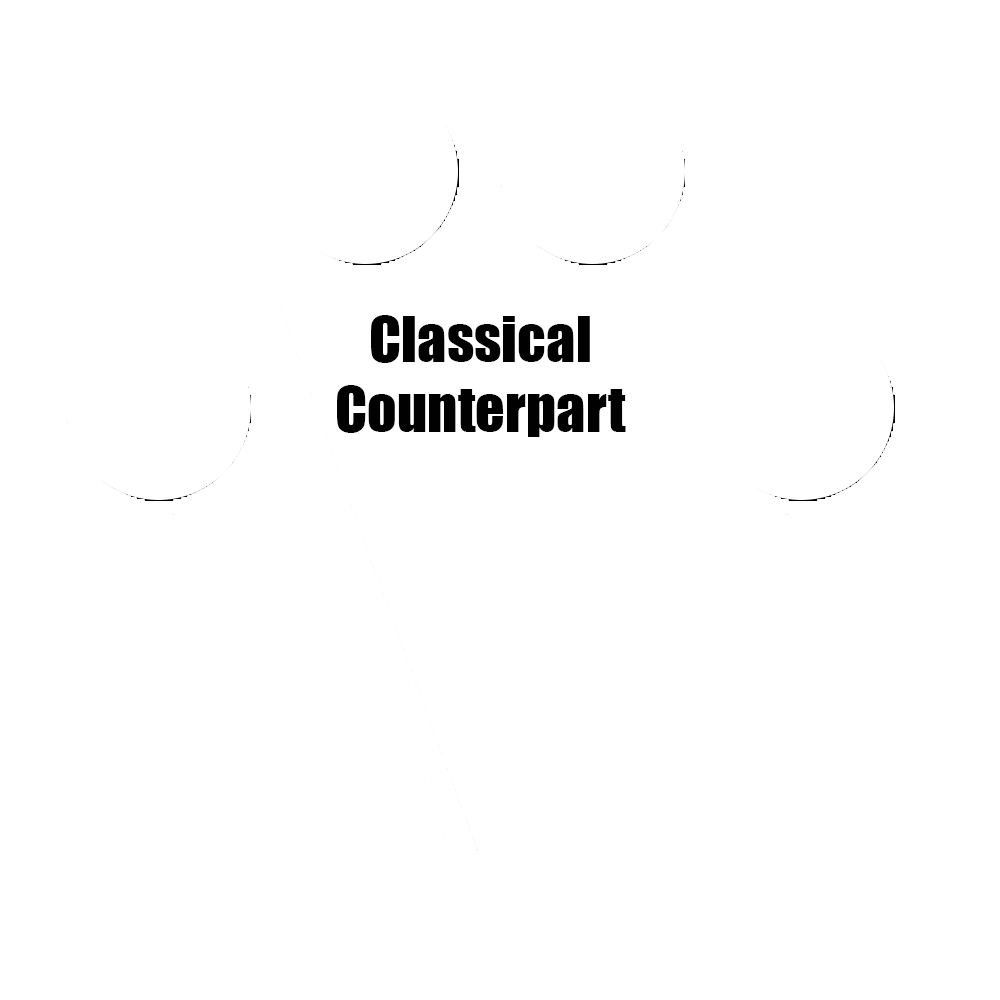
<style>
.page{position:relative;width:1000px;height:1000px;background:#ffffff}
.page>*{position:absolute;margin:0}
.t1{font:58.3px "Impact";color:#010101}
</style>
<div class="page">
<p class="t1" style="left:337px;top:315px;width:289px;height:122px;text-align:center">Classical<br>Counterpart</p>
</div>
